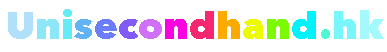
<style>
.page{position:relative;width:387px;height:52px;background:#ffffff}
.page>*{position:absolute;margin:0}
.t1{font:38px "AvenirNext-Heavy";color:#b1e0fa}
.t2{font:38px "AvenirNext-Heavy";color:#8ce8f9}
.t3{font:38px "AvenirNext-Heavy";color:#62edf6}
.t4{font:38px "AvenirNext-Heavy";color:#62b2f6}
.t5{font:38px "AvenirNext-Heavy";color:#6b7ef7}
.t6{font:38px "AvenirNext-Heavy";color:#805bf7}
.t7{font:38px "AvenirNext-Heavy";color:#d070f8}
.t8{font:38px "AvenirNext-Heavy";color:#fb00e0}
.t9{font:38px "AvenirNext-Heavy";color:#f62770}
.t10{font:38px "AvenirNext-Heavy";color:#fbab00}
.t11{font:38px "AvenirNext-Heavy";color:#ecfb00}
.t12{font:38px "AvenirNext-Heavy";color:#7cfb00}
.t13{font:38px "AvenirNext-Heavy";color:#00f2fb}
.t14{font:38px "AvenirNext-Heavy";color:#4cf7d1}
.t15{font:38px "AvenirNext-Heavy";color:#79f6fb}
.t16{font:38px "AvenirNext-Heavy";color:#a4f9fc}
</style>
<div class="page">
<p class="t1" style="left:8px;top:9px;width:376px;height:30px">U<span class="t2">n</span><span class="t3">i</span><span class="t4">s</span><span class="t5">e</span><span class="t6">c</span><span class="t7">o</span><span class="t8">n</span><span class="t9">d</span><span class="t10">h</span><span class="t11">a</span><span class="t12">n</span><span class="t13">d</span><span class="t14">.</span><span class="t15">h</span><span class="t16">k</span></p>
</div>
